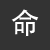
<style>
.page{position:relative;width:50px;height:50px;background:#333333}
.page>*{position:absolute;margin:0}
.t1{font:28px "AdobeHeitiStd-Regular";color:#ffffff}
</style>
<div class="page">
<p class="t1" style="left:11px;top:9px;width:28px;height:28px">命</p>
</div>
